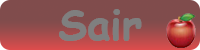
<style>
.page{position:relative;width:200px;height:50px;background:#804c4c}
.page>*{position:absolute;margin:0}
.t1{font:41.7px "ComicSansMS-Bold";color:#7f7f7f}
</style>
<div class="page">
<p class="t1" style="left:59px;top:9px;width:83px;height:32px">Sair</p>
</div>
